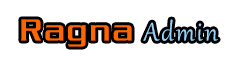
<style>
.page{position:relative;width:240px;height:60px;background:#ffffff}
.page>*{position:absolute;margin:0}
.t1{font:31.6px "Dungeon-Regular";letter-spacing:0.075em;color:#ff6600;scale:0.95 1}
.t2{font:31.6px "Gabriola";letter-spacing:0.075em;color:#97d6fe;scale:0.95 1}
</style>
<div class="page">
<p class="t1" style="left:21px;top:19px;width:197px;height:28px">Ragna <span class="t2">Admin</span></p>
</div>
